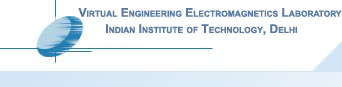
<style>
.page{position:relative;width:342px;height:87px;background:#ffffff}
.page>*{position:absolute;margin:0}
.t1{font:12px "Arial-BoldMT";color:#59799f;font-variant:small-caps}
</style>
<div class="page">
<p class="t1" style="left:78px;top:8px;width:264px;height:9px">Virtual Engineering Electromagnetics Laboratory</p>
<p class="t1" style="left:106px;top:24px;width:191px;height:11px">Indian Institute of Technology, Delhi</p>
</div>
